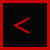
<style>
.page{position:relative;width:50px;height:50px;background:#040404}
.page>*{position:absolute;margin:0}
.t1{font:27.6px "LucidaGrande";color:#c70505}
</style>
<div class="page">
<p class="t1" style="left:13px;top:17px;width:17px;height:17px">&lt;</p>
</div>
